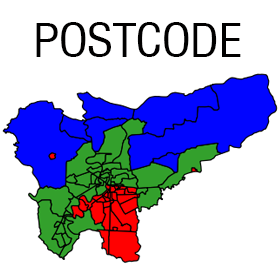
<style>
.page{position:relative;width:280px;height:280px;background:#ffffff}
.page>*{position:absolute;margin:0}
.t1{font:72px "PSLDisplay";color:#010000}
</style>
<div class="page">
<p class="t1" style="left:36px;top:22px;width:205px;height:35px">POSTCODE</p>
</div>
